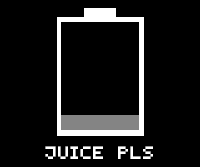
<style>
.page{position:relative;width:200px;height:167px;background:#000000}
.page>*{position:absolute;margin:0}
.t1{font:25px "SmallestPixel-7";color:#ffffff}
</style>
<div class="page">
<p class="t1" style="left:45px;top:146px;width:108px;height:13px">Juice Pls</p>
</div>
